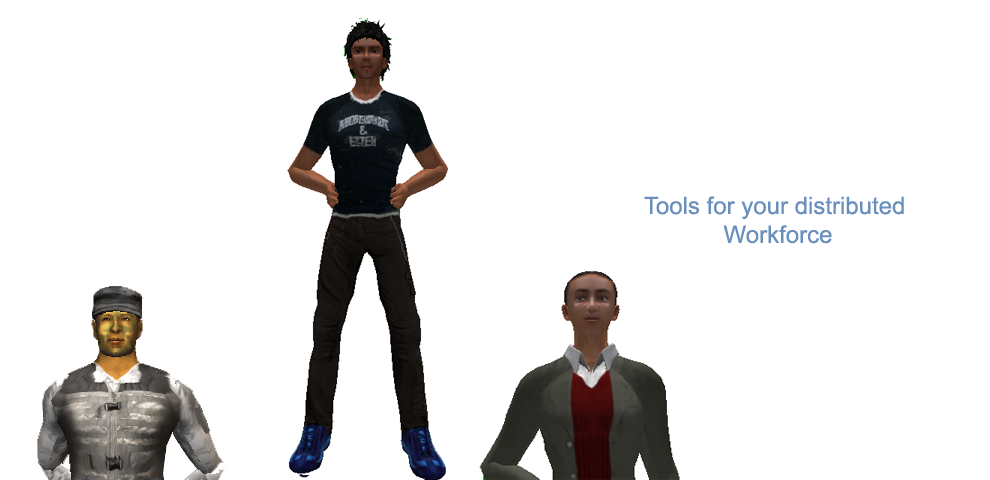
<style>
.page{position:relative;width:990px;height:480px;background:#ffffff}
.page>*{position:absolute;margin:0}
.t1{font:24px "ArialMT";color:#698fbc}
</style>
<div class="page">
<p class="t1" style="left:644px;top:196px;width:260px;height:48px;text-align:center">Tools for your distributed <br>Workforce</p>
</div>
